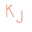
<style>
.page{position:relative;width:32px;height:32px;background:#ffffff}
.page>*{position:absolute;margin:0}
.t1{font:16px "AIkelsoL";color:#fa9d8e}
</style>
<div class="page">
<p class="t1" style="left:6px;top:4px;width:9px;height:14px">K</p>
<p class="t1" style="left:16px;top:10px;width:7px;height:14px">J</p>
</div>
